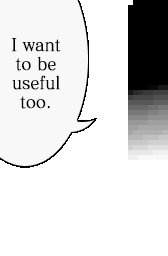
<style>
.page{position:relative;width:168px;height:256px;background:#ffffff}
.page>*{position:absolute;margin:0}
.t1{font:17.6px/19px "MatissePro-M";letter-spacing:-0.01em;color:#000000;font-weight:bold;scale:0.91 1}
</style>
<div class="page">
<p class="t1" style="left:11px;top:38px;width:50px;height:71px;text-align:center">I want<br>to be<br>useful<br>too.</p>
</div>
